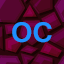
<style>
.page{position:relative;width:64px;height:64px}
.page>*{position:absolute;margin:0}
.t1{font:30px "Gautami-Bold";color:#1e90ff}
</style>
<div class="page">
<p class="t1" style="left:12px;top:22px;width:40px;height:21px">OC</p>
</div>
